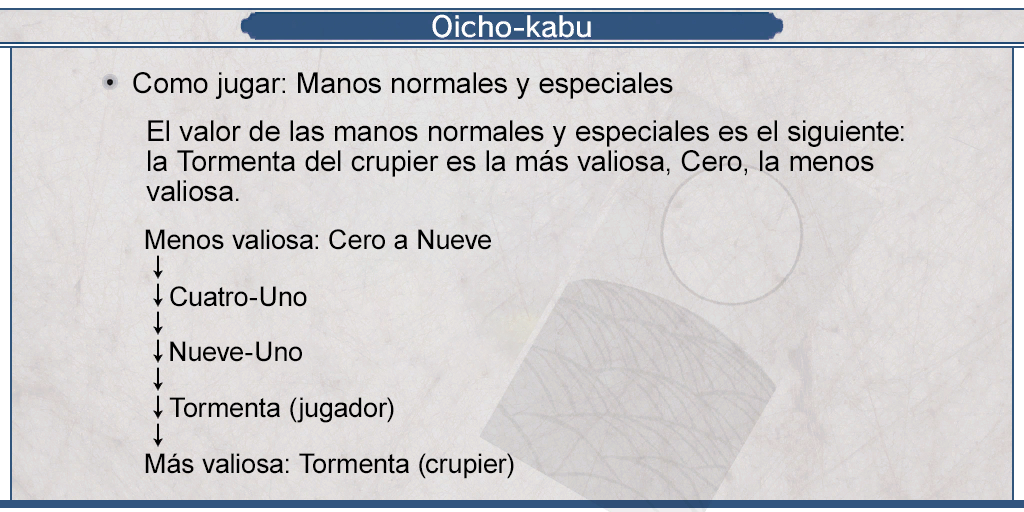
<style>
.page{position:relative;width:1024px;height:512px}
.page>*{position:absolute;margin:0}
.t1{font:29px "ArialMT";color:#000000}
.t2{font:29px/30px "ArialMT";color:#000000}
.t3{font:27px "ArialMT";color:#000000}
</style>
<div class="page">
<p class="t1" style="left:133px;top:72px;width:540px;height:27px">Como jugar: Manos normales y especiales</p>
<p class="t2" style="left:146px;top:120px;width:758px;height:82px">El valor de las manos normales y especiales es el siguiente:<br>la Tormenta del crupier es la más valiosa, Cero, la menos <br>valiosa.</p>
<p class="t3" style="left:145px;top:229px;width:346px;height:21px">Menos valiosa: Cero a Nueve</p>
<p class="t3" style="left:170px;top:286px;width:137px;height:21px">Cuatro-Uno</p>
<p class="t3" style="left:170px;top:341px;width:132px;height:21px">Nueve-Uno</p>
<p class="t3" style="left:169px;top:397px;width:225px;height:26px">Tormenta (jugador)</p>
<p class="t3" style="left:145px;top:453px;width:369px;height:26px">Más valiosa: Tormenta (crupier)</p>
</div>
